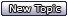
<style>
.page{position:relative;width:68px;height:17px}
.page>*{position:absolute;margin:0}
.t1{font:10px "Tahoma";color:#fdfdfd;scale:1.14 1}
</style>
<div class="page">
<p class="t1" style="left:9px;top:5px;width:52px;height:9px">New Topic</p>
</div>
